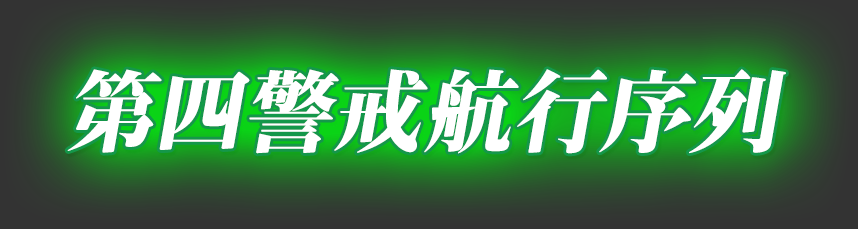
<style>
.page{position:relative;width:858px;height:229px}
.page>*{position:absolute;margin:0}
.t1{font:89px "KochoStd-Heavy";letter-spacing:0.015em;color:#ffffff;font-weight:bold;font-style:italic}
</style>
<div class="page">
<p class="t1" style="left:67px;top:69px;width:719px;height:85px">第四警戒航行序列</p>
</div>
